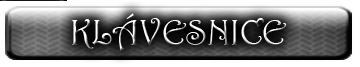
<style>
.page{position:relative;width:360px;height:67px}
.page>*{position:absolute;margin:0}
.t1{font:36px "Harrington"}
</style>
<div class="page">
<p class="t1" style="left:72px;top:13px;width:215px;height:38px">KLÁVESNICE</p>
</div>
